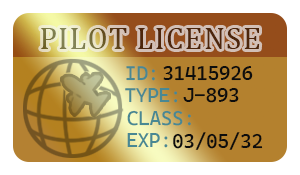
<style>
.page{position:relative;width:300px;height:175px;background:#ffffff}
.page>*{position:absolute;margin:0}
.t1{font:31.1px "Cambria";letter-spacing:0.04em}
.t2{font:20px "CascadiaMono_427.000wght";letter-spacing:-0.02em;color:#0d0d0d}
.t3{font:20px "CascadiaMono_427.000wght";letter-spacing:-0.02em;color:#498893}
</style>
<div class="page">
<p class="t1" style="left:41px;top:28px;width:219px;height:21px">PILOT LICENSE</p>
<p class="t2" style="left:163px;top:65px;width:90px;height:16px">31415926</p>
<p class="t3" style="left:126px;top:66px;width:29px;height:15px">ID:</p>
<p class="t3" style="left:125px;top:88px;width:53px;height:15px">TYPE:</p>
<p class="t2" style="left:183px;top:87px;width:56px;height:16px">J-893</p>
<p class="t3" style="left:127px;top:110px;width:64px;height:16px">CLASS:</p>
<p class="t3" style="left:127px;top:133px;width:41px;height:15px">EXP:</p>
<p class="t2" style="left:173px;top:132px;width:90px;height:18px">03/05/32</p>
</div>
